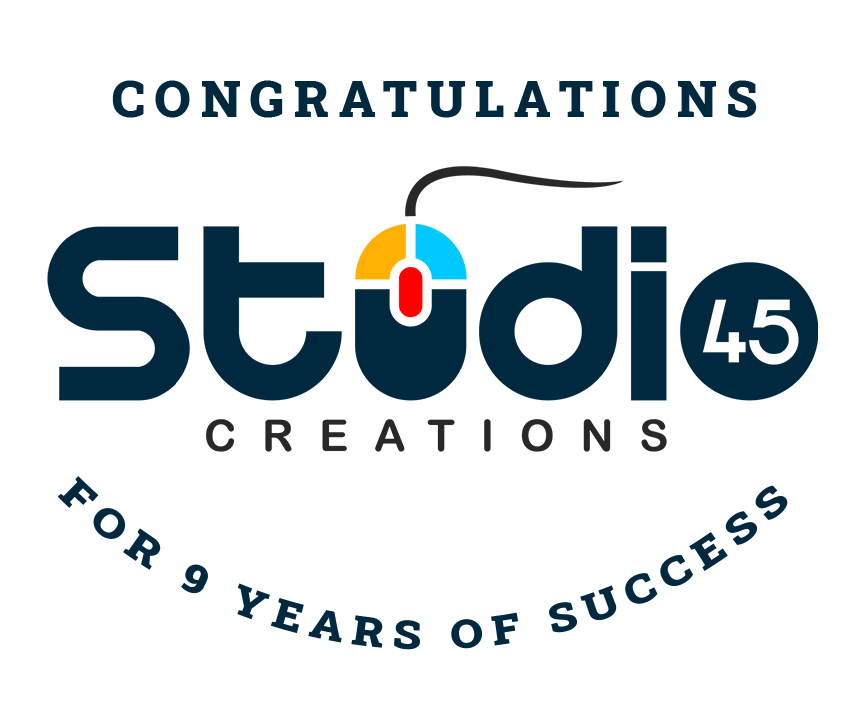
<style>
.page{position:relative;width:865px;height:728px;background:#ffffff}
.page>*{position:absolute;margin:0}
.t1{font:50px "RobotoSlab-Black";letter-spacing:0.2em;color:#00293f;text-transform:uppercase}
.t2{font:40px/46px "RobotoSlab-Black";letter-spacing:0.2em;color:#00293f;text-transform:uppercase}
</style>
<div class="page">
<p class="t1" style="left:112px;top:80px;width:645px;height:38px">Congratulations</p>
<p class="t2" style="left:57px;top:476px;width:731px;height:174px;text-align:center">For 9 years of Success</p>
</div>
